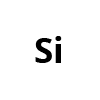
<style>
.page{position:relative;width:100px;height:100px;background:#ffffff}
.page>*{position:absolute;margin:0}
.t1{font:35px "OpenSans-Bold";color:#000000}
</style>
<div class="page">
<p class="t1" style="left:35px;top:36px;width:27px;height:27px">Si</p>
</div>
